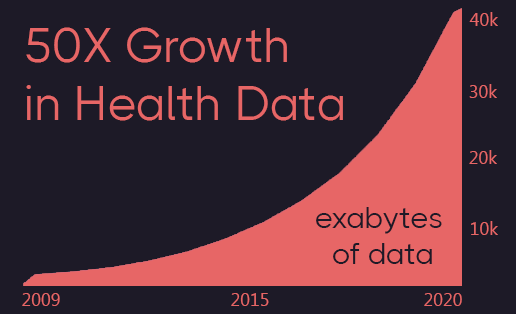
<style>
.page{position:relative;width:516px;height:314px;background:#1d1a27}
.page>*{position:absolute;margin:0}
.t1{font:18px "MyanmarText";color:#e76666}
.t2{font:48px "THICCCBOI-Regular";color:#e76666}
.t3{font:30px "THICCCBOI-Regular";color:#1d1a27}
</style>
<div class="page">
<p class="t1" style="left:469px;top:12px;width:29px;height:14px">40k</p>
<p class="t2" style="left:26px;top:27px;width:317px;height:94px">50X Growth<br>in Health Data</p>
<p class="t1" style="left:469px;top:84px;width:28px;height:14px">30k</p>
<p class="t1" style="left:469px;top:150px;width:28px;height:14px">20k</p>
<p class="t3" style="left:316px;top:207px;width:126px;height:57px;text-align:center">exabytes <br>of data</p>
<p class="t1" style="left:471px;top:221px;width:27px;height:14px">10k</p>
<p class="t1" style="left:22px;top:293px;width:38px;height:13px">2009</p>
<p class="t1" style="left:231px;top:293px;width:38px;height:13px">2015</p>
<p class="t1" style="left:424px;top:293px;width:38px;height:13px">2020</p>
</div>
